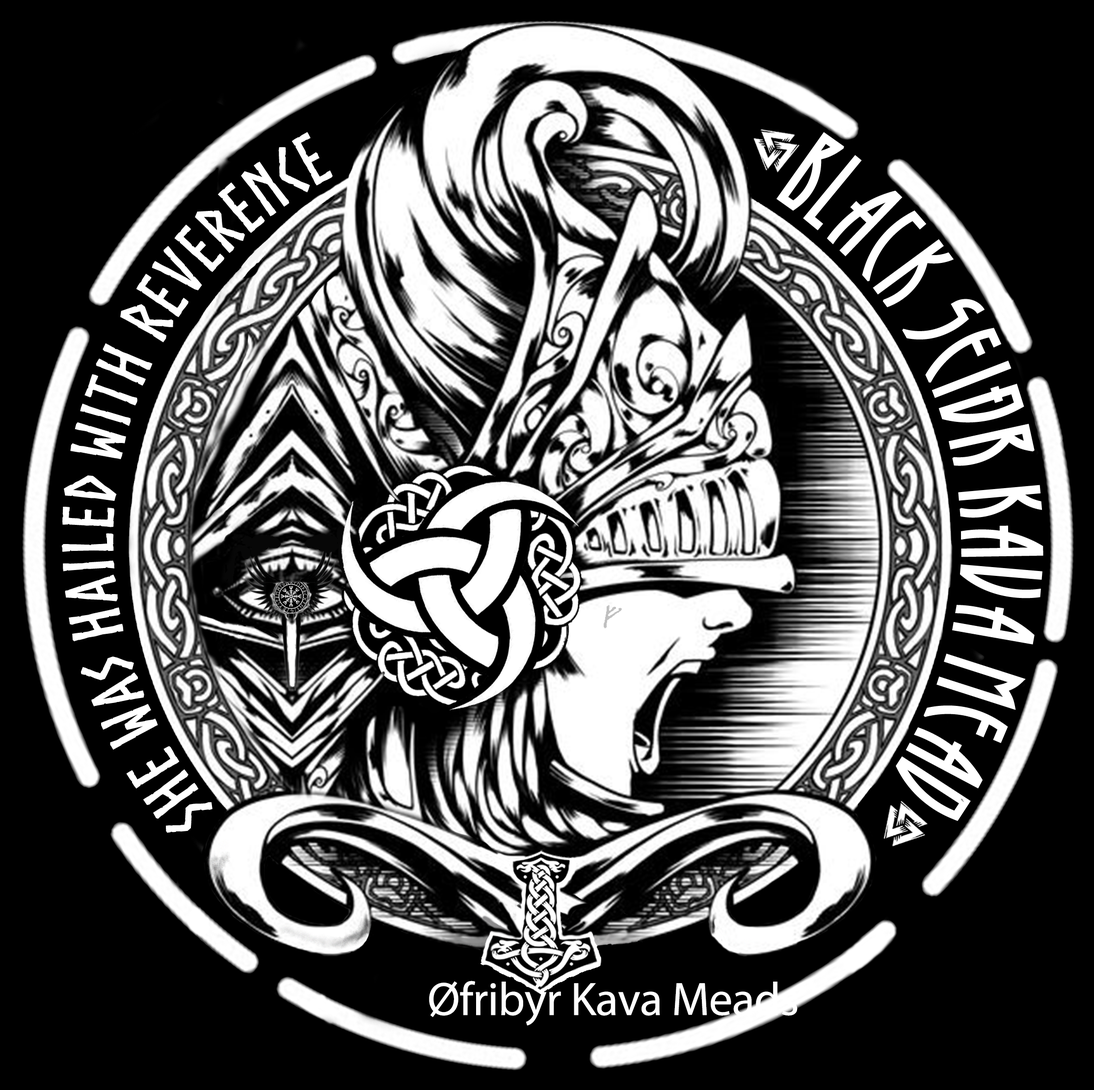
<style>
.page{position:relative;width:1094px;height:1090px;background:#000000}
.page>*{position:absolute;margin:0}
.t1{font:69.5px "Norse-Bold";letter-spacing:0.01em;color:#ffffff}
.t2{font:98.1px "RunyTunesRevisitedNF";letter-spacing:0.045em;color:#ffffff}
.t3{font:47px "MyriadPro-Regular";letter-spacing:-0.01em;color:#ffffff}
</style>
<div class="page">
<p class="t1" style="left:61px;top:132px;width:272px;height:701px;text-align:center">she was hailed with reverence</p>
<p class="t2" style="left:776px;top:132px;width:267px;height:689px;text-align:center">Black Seiðr Kava Mead</p>
<p class="t3" style="left:429px;top:981px;width:368px;height:45px">Øfribýr Kava Meads</p>
</div>
